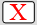
<style>
.page{position:relative;width:37px;height:25px;background:#ffffff}
.page>*{position:absolute;margin:0}
.t1{font:24px "TimesNewRomanPSMT";color:#ff0000}
</style>
<div class="page">
<p class="t1" style="left:9px;top:4px;width:18px;height:16px">X</p>
</div>
